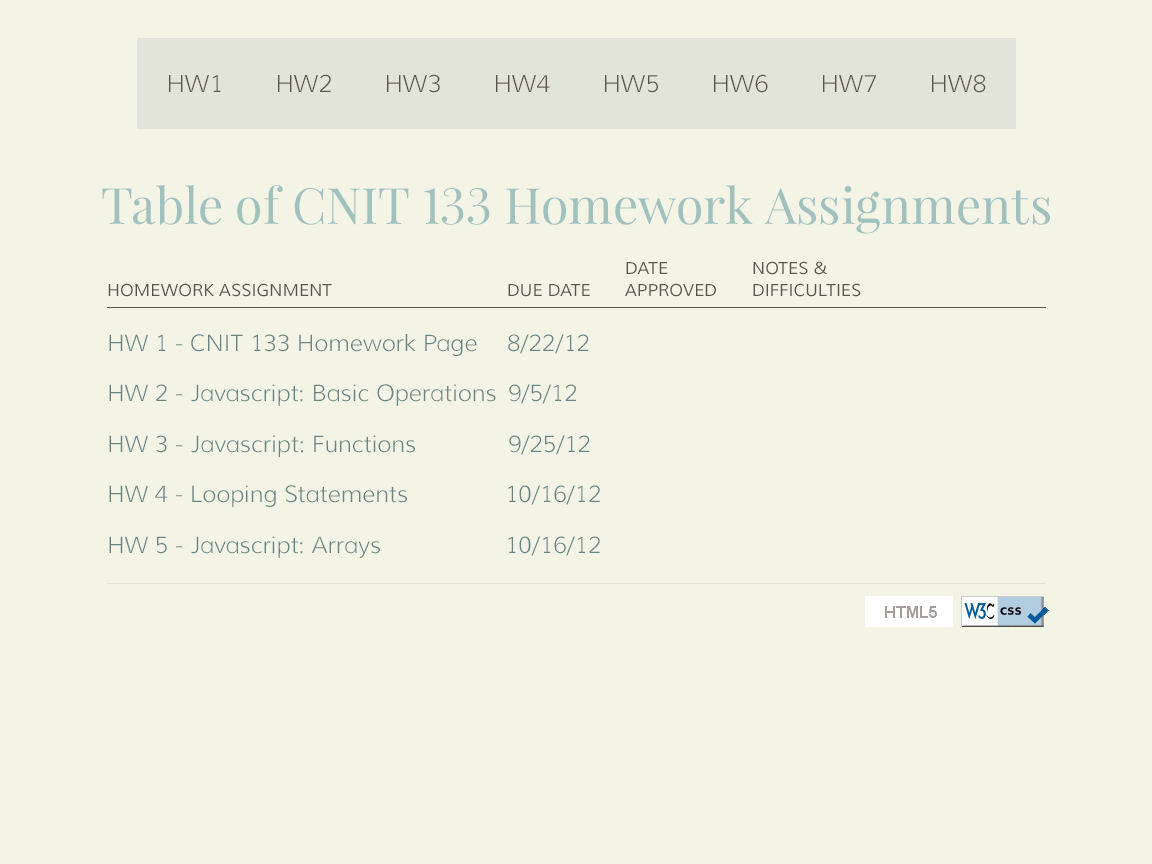
<style>
.page{position:relative;width:1152px;height:864px;background:#f3f4e5}
.page>*{position:absolute;margin:0}
.t1{font:24px "Muli-Light";color:#59554e}
.t2{font:50px "PlayfairDisplay";color:#a1c1be}
.t3{font:17px/22px "Muli";color:#59554e;text-transform:uppercase}
.t4{font:17px "Muli";color:#59554e;text-transform:uppercase}
.t5{font:23px "Muli-Light";color:#698582}
</style>
<div class="page">
<p class="t1" style="left:169px;top:75px;width:52px;height:17px">HW1</p>
<p class="t1" style="left:278px;top:74px;width:53px;height:18px">HW2</p>
<p class="t1" style="left:387px;top:74px;width:53px;height:19px">HW3</p>
<p class="t1" style="left:496px;top:75px;width:54px;height:17px">HW4</p>
<p class="t1" style="left:605px;top:75px;width:53px;height:18px">HW5</p>
<p class="t1" style="left:714px;top:74px;width:54px;height:19px">HW6</p>
<p class="t1" style="left:823px;top:75px;width:53px;height:17px">HW7</p>
<p class="t1" style="left:932px;top:74px;width:54px;height:19px">HW8</p>
<p class="t2" style="left:102px;top:184px;width:948px;height:50px">Table of CNIT 133 Homework Assignments</p>
<p class="t3" style="left:625px;top:262px;width:91px;height:35px">DATE <br>APPROVED</p>
<p class="t3" style="left:753px;top:261px;width:108px;height:36px">NOTES &amp;<br>DIFFICULTIES</p>
<p class="t4" style="left:108px;top:283px;width:224px;height:14px">homework assignment</p>
<p class="t4" style="left:508px;top:284px;width:82px;height:13px">DUE DATE</p>
<p class="t5" style="left:109px;top:334px;width:368px;height:22px">HW 1 - CNIT 133 Homework Page</p>
<p class="t5" style="left:508px;top:334px;width:81px;height:20px">8/22/12</p>
<p class="t5" style="left:109px;top:384px;width:387px;height:22px">HW 2 - Javascript: Basic Operations</p>
<p class="t5" style="left:509px;top:384px;width:67px;height:20px">9/5/12</p>
<p class="t5" style="left:109px;top:435px;width:306px;height:22px">HW 3 - Javascript: Functions</p>
<p class="t5" style="left:509px;top:435px;width:81px;height:20px">9/25/12</p>
<p class="t5" style="left:109px;top:485px;width:298px;height:22px">HW 4 - Looping Statements</p>
<p class="t5" style="left:508px;top:485px;width:92px;height:20px">10/16/12</p>
<p class="t5" style="left:109px;top:536px;width:271px;height:22px">HW 5 - Javascript: Arrays</p>
<p class="t5" style="left:508px;top:536px;width:92px;height:20px">10/16/12</p>
</div>
